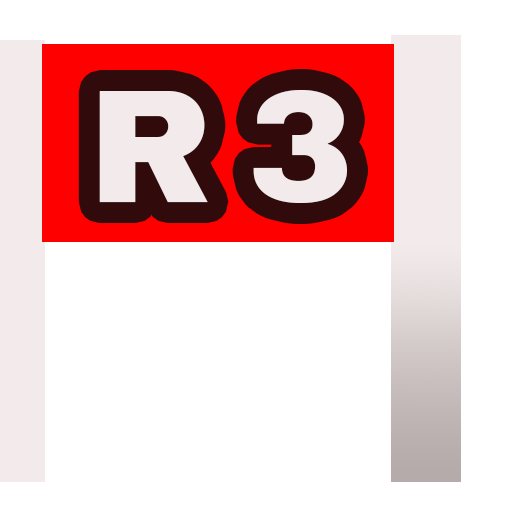
<style>
.page{position:relative;width:512px;height:512px;background:#ffffff}
.page>*{position:absolute;margin:0}
.t1{font:160px "ArchivoBlack-Regular";letter-spacing:-0.06em;color:#f3ebeb}
</style>
<div class="page">
<p class="t1" style="left:99px;top:90px;width:248px;height:113px">R 3</p>
</div>
